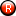
<style>
.page{position:relative;width:16px;height:16px}
.page>*{position:absolute;margin:0}
.t1{font:13px "Calibri";color:#ffffff}
</style>
<div class="page">
<p class="t1" style="left:6px;top:4px;width:5px;height:8px">R</p>
</div>
